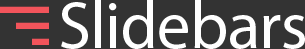
<style>
.page{position:relative;width:305px;height:49px;background:#333333}
.page>*{position:absolute;margin:0}
.t1{font:67px "MyriadPro-Regular";letter-spacing:-0.01em;color:#ffffff}
</style>
<div class="page">
<p class="t1" style="left:61px;top:0px;width:244px;height:49px">Slidebars</p>
</div>
